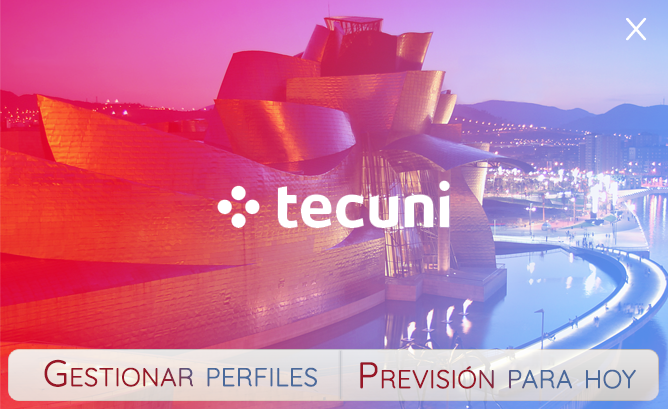
<style>
.page{position:relative;width:668px;height:409px}
.page>*{position:absolute;margin:0}
.t1{font:30.2px "Quicksand-Light";color:#ffffff;font-variant:small-caps;font-weight:bold;scale:1.19 1}
.t2{font:36px "Quicksand-Light";font-variant:small-caps;font-weight:bold}
</style>
<div class="page">
<p class="t1" style="left:626px;top:17px;width:21px;height:24px">X</p>
<p class="t2" style="left:44px;top:359px;width:273px;height:28px">Gestionar perfiles</p>
<p class="t2" style="left:360px;top:362px;width:276px;height:27px">Previsión para hoy</p>
</div>
